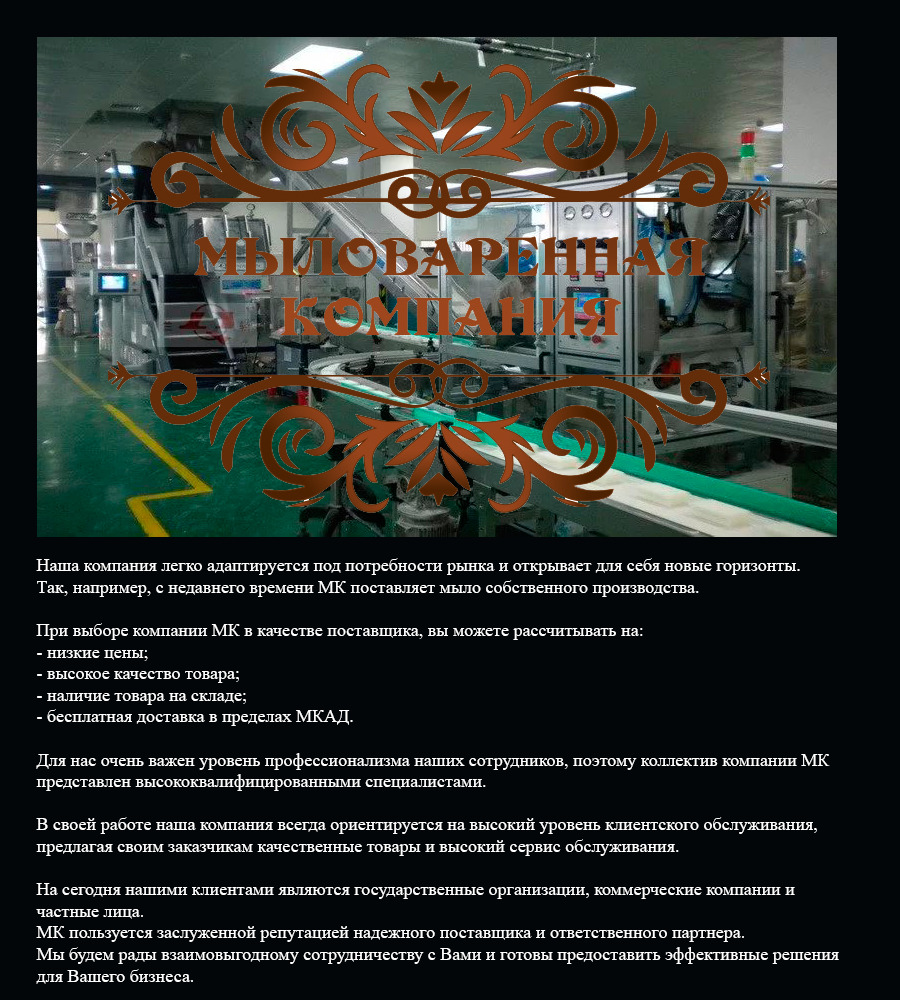
<style>
.page{position:relative;width:900px;height:1000px;background:#020609}
.page>*{position:absolute;margin:0}
.t1{font:18px "TimesNewRomanPSMT";color:#ffffff}
</style>
<div class="page">
<p class="t1" style="left:36px;top:558px;width:803px;height:426px">Наша компания легко адаптируется под потребности рынка и открывает для себя новые горизонты. <br>Так, например, с недавнего времени МК поставляет мыло собственного производства.<br><br>При выборе компании МК в качестве поставщика, вы можете рассчитывать на:<br>- низкие цены;<br>- высокое качество товара;<br>- наличие товара на складе;<br>- бесплатная доставка в пределах МКАД.<br><br>Для нас очень важен уровень профессионализма наших сотрудников, поэтому коллектив компании МК <br>представлен высококвалифицированными специалистами.<br><br>В своей работе наша компания всегда ориентируется на высокий уровень клиентского обслуживания, <br>предлагая своим заказчикам качественные товары и высокий сервис обслуживания.<br><br>На сегодня нашими клиентами являются государственные организации, коммерческие компании и <br>частные лица. <br>МК пользуется заслуженной репутацией надежного поставщика и ответственного партнера. <br>Мы будем рады взаимовыгодному сотрудничеству с Вами и готовы предоставить эффективные решения <br>для Вашего бизнеса.</p>
</div>
